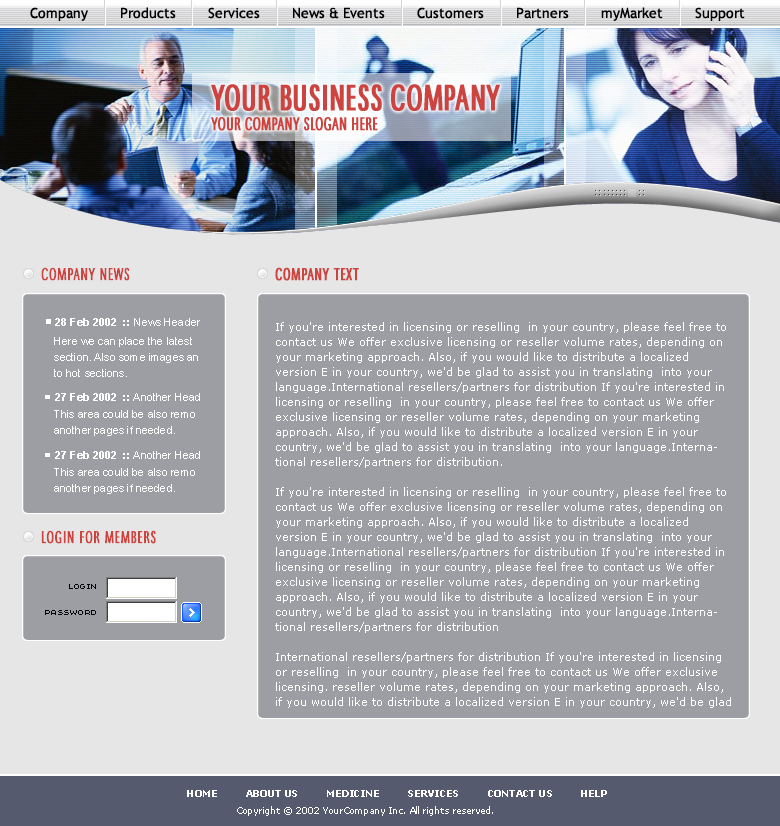
<style>
.page{position:relative;width:780px;height:826px;background:#9d9ea3}
.page>*{position:absolute;margin:0}
.t1{font:14px "TrebuchetMS";color:#000000}
.t2{font:19px/20px "MaximaCyrTCY-LighComp";color:#cc433f;font-weight:bold}
.t3{font:38px/20px "MaximaCyrTCY-LighComp";color:#cc433f;font-weight:bold}
.t4{font:18px "MaximaCyrTCY-LighComp";letter-spacing:0.02em;color:#cc433f;font-weight:bold}
.t5{font:11px/15px "Verdana";color:#ffffff}
.t6{font:10px "Verdana-Bold";letter-spacing:-0.06em;color:#ffffff}
.t7{font:9px "Verdana";color:#ffffff}
</style>
<div class="page">
<p class="t1" style="left:30px;top:7px;width:715px;height:14px">Company        Products        Services        News &amp; Events        Customers        Partners        myMarket        Support</p>
<p class="t2" style="left:211px;top:84px;width:289px;height:47px"><span class="t3">YOUR BUSINESS COMPANY<br></span>YOUR COMPANY SLOGAN HERE</p>
<p class="t4" style="left:41px;top:267px;width:89px;height:14px">COMPANY NEWS</p>
<p class="t4" style="left:275px;top:267px;width:84px;height:14px">COMPANY TEXT</p>
<p class="t5" style="left:275px;top:322px;width:456px;height:386px">If you're interested in licensing or reselling  in your country, please feel free to contact us We offer exclusive licensing or reseller volume rates, depending on your marketing approach. Also, if you would like to distribute a localized version E in your country, we'd be glad to assist you in translating  into your language.International resellers/partners for distribution If you're interested in licensing or reselling  in your country, please feel free to contact us We offer exclusive licensing or reseller volume rates, depending on your marketing approach. Also, if you would like to distribute a localized version E in your country, we'd be glad to assist you in translating  into your language.International resellers/partners for distribution.<br><br>If you're interested in licensing or reselling  in your country, please feel free to contact us We offer exclusive licensing or reseller volume rates, depending on your marketing approach. Also, if you would like to distribute a localized version E in your country, we'd be glad to assist you in translating  into your language.International resellers/partners for distribution If you're interested in licensing or reselling  in your country, please feel free to contact us We offer exclusive licensing or reseller volume rates, depending on your marketing approach. Also, if you would like to distribute a localized version E in your country, we'd be glad to assist you in translating  into your language.International resellers/partners for distribution<br><br>International resellers/partners for distribution If you're interested in licensing or reselling  in your country, please feel free to contact us We offer exclusive licensing. reseller volume rates, depending on your marketing approach. Also, if you would like to distribute a localized version E in your country, we'd be glad to assist you in translating  into your language.International resellers/partners for distribution</p>
<p class="t4" style="left:41px;top:530px;width:115px;height:14px">LOGIN FOR MEMBERS</p>
<p class="t6" style="left:187px;top:790px;width:420px;height:7px">HOME          ABOUT US          MEDICINE          SERVICES          CONTACT US          HELP</p>
<p class="t7" style="left:237px;top:806px;width:256px;height:10px">Copyright © 2002 YourCompany Inc. All rights reserved.</p>
</div>
